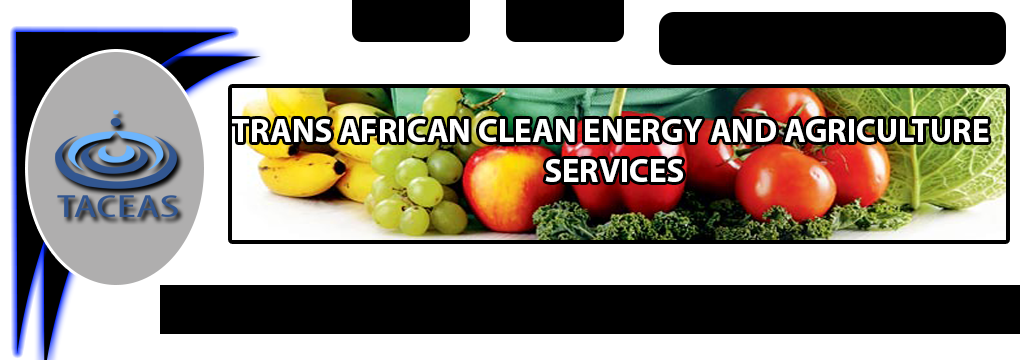
<style>
.page{position:relative;width:1024px;height:360px;background:#ffffff}
.page>*{position:absolute;margin:0}
.t1{font:33px "MyriadPro-Bold";color:#ffffff}
</style>
<div class="page">
<p class="t1" style="left:232px;top:119px;width:757px;height:63px;text-align:center">TRANS AFRICAN CLEAN ENERGY AND AGRICULTURE <br>SERVICES</p>
</div>
